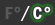
<style>
.page{position:relative;width:55px;height:25px;background:#333333}
.page>*{position:absolute;margin:0}
.t1{font:18px "FranklinGothic-DemiCond";letter-spacing:0.02em;color:#5a5959}
.t2{font:18px "FranklinGothic-DemiCond";letter-spacing:0.02em;color:#ffffff}
</style>
<div class="page">
<p class="t1" style="left:5px;top:6px;width:16px;height:13px">F°</p>
<p class="t2" style="left:20px;top:6px;width:10px;height:15px">/</p>
<p class="t2" style="left:33px;top:6px;width:18px;height:14px">C°</p>
</div>
